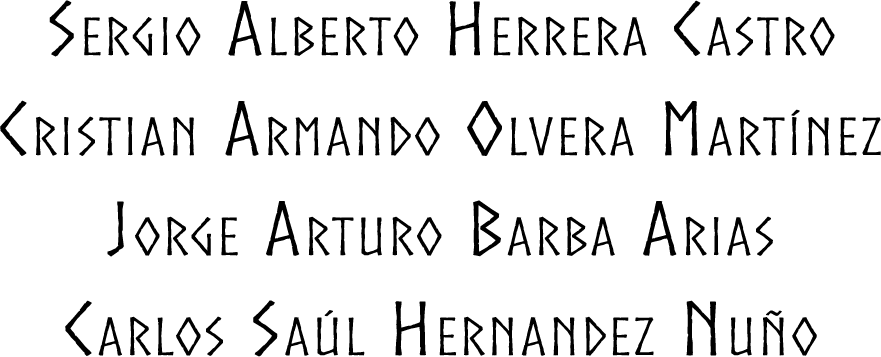
<style>
.page{position:relative;width:881px;height:357px;background:#ffffff}
.page>*{position:absolute;margin:0}
.t1{font:72px/100px "Norse";color:#000000;font-variant:small-caps;font-weight:bold;scale:1.3 1}
</style>
<div class="page">
<p class="t1" style="left:0px;top:0px;width:881px;height:357px;text-align:center">Sergio Alberto Herrera Castro<br>Cristian Armando Olvera Martínez<br>Jorge Arturo Barba Arias<br>Carlos Saúl Hernandez Nuño</p>
</div>
